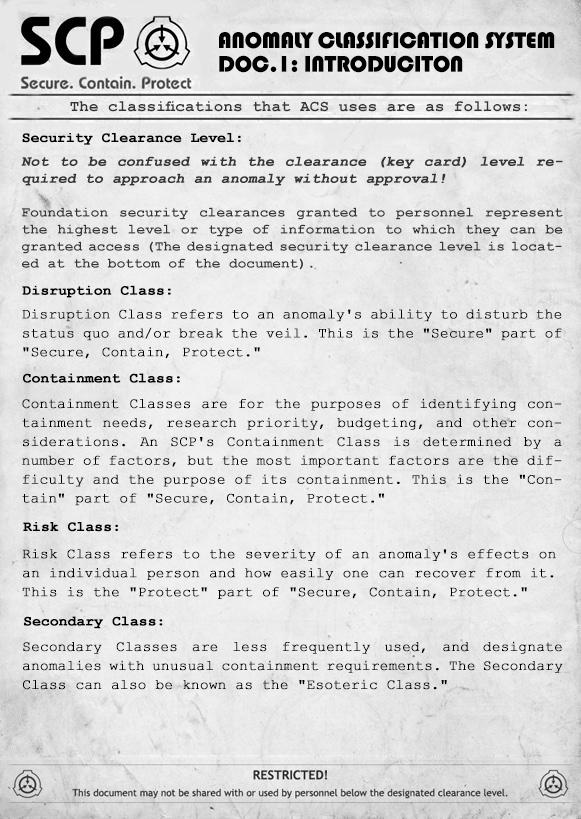
<style>
.page{position:relative;width:581px;height:819px}
.page>*{position:absolute;margin:0}
.t1{font:23.6px/23.6px "Bauhaus93";letter-spacing:-0.025em;color:#000000;text-transform:uppercase}
.t2{font:15.7px "CourierNewPS-BoldMT";letter-spacing:0.01em;color:#343434}
.t3{font:14.2px "CourierNewPS-BoldMT";color:#000000;font-weight:bold}
.t4{font:14.2px "CourierNewPS-BoldMT";letter-spacing:0.01em;color:#343434}
.t5{font:14.2px "CourierNewPS-BoldMT";letter-spacing:0.01em;color:#343434;font-weight:bold;font-style:italic}
.t6{font:14.2px/18.9px "CourierNewPSMT";color:#000000;font-weight:bold}
</style>
<div class="page">
<p class="t1" style="left:219px;top:32px;width:336px;height:41px">Anomaly Classification System<br>Doc.1: INTRODUCITON</p>
<p class="t2" style="left:70px;top:101px;width:457px;height:11px">The classifications that ACS uses are as follows:</p>
<p class="t3" style="left:22px;top:133px;width:219px;height:12px">Security Clearance Level:</p>
<p class="t4" style="left:21px;top:156px;width:542px;height:114px;text-align:justify"><span class="t5">Not to be confused with the clearance (key card) level required to approach an anomaly without approval!<br><br></span>Foundation security clearances granted to personnel represent the highest level or type of information to which they can be granted access (The designated security clearance level is located at the bottom of the document).</p>
<p class="t3" style="left:22px;top:285px;width:149px;height:13px">Disruption Class:</p>
<p class="t6" style="left:22px;top:309px;width:540px;height:50px;text-align:justify">Disruption Class refers to an anomaly's ability to disturb the status quo and/or break the veil. This is the "Secure" part of "Secure, Contain, Protect."</p>
<p class="t3" style="left:23px;top:373px;width:157px;height:10px">Containment Class:</p>
<p class="t6" style="left:22px;top:398px;width:540px;height:108px;text-align:justify">Containment Classes are for the purposes of identifying containment needs, research priority, budgeting, and other considerations. An SCP's Containment Class is determined by a number of factors, but the most important factors are the difficulty and the purpose of its containment. This is the "Contain" part of "Secure, Contain, Protect."</p>
<p class="t3" style="left:23px;top:522px;width:95px;height:10px">Risk Class:</p>
<p class="t6" style="left:22px;top:549px;width:534px;height:50px;text-align:justify">Risk Class refers to the severity of an anomaly's effects on an individual person and how easily one can recover from it. This is the "Protect" part of "Secure, Contain, Protect."</p>
<p class="t3" style="left:24px;top:616px;width:139px;height:13px">Secondary Class:</p>
<p class="t6" style="left:23px;top:641px;width:540px;height:49px;text-align:justify">Secondary Classes are less frequently used, and designate anomalies with unusual containment requirements. The Secondary Class can also be known as the "Esoteric Class."</p>
</div>
